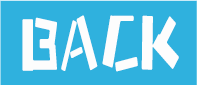
<style>
.page{position:relative;width:197px;height:85px;background:#2fb1de}
.page>*{position:absolute;margin:0}
.t1{font:99.6px "HappyZcool";letter-spacing:-0.02em;color:#fdfdfd;text-transform:uppercase;scale:0.67 1}
</style>
<div class="page">
<p class="t1" style="left:22px;top:15px;width:157px;height:57px">BACK</p>
</div>
